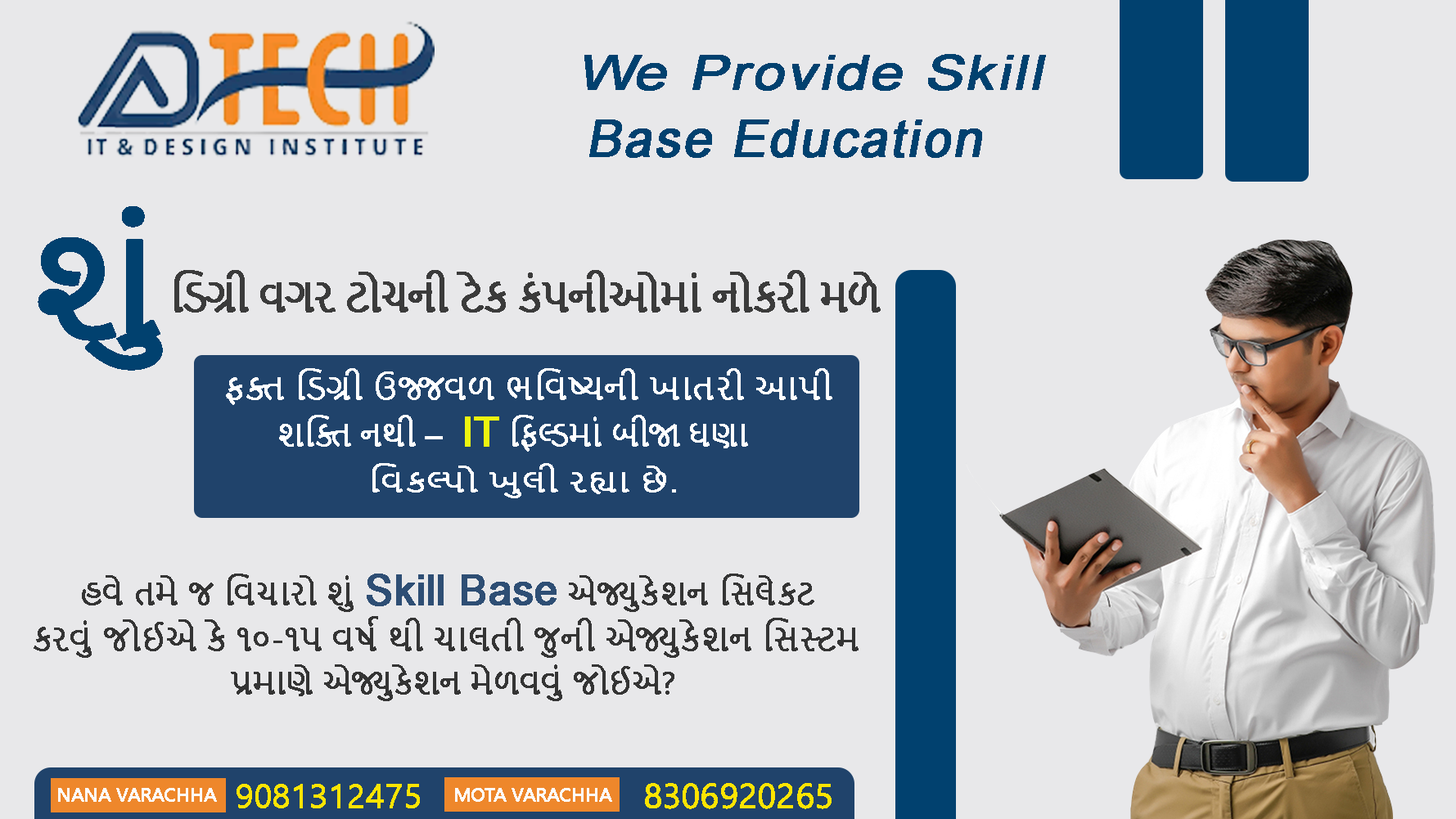
<style>
.page{position:relative;width:1456px;height:819px;background:#e8e8ea}
.page>*{position:absolute;margin:0}
.t1{font:47.7px "ArialMT";letter-spacing:0.03em;color:#01416f;font-weight:bold;font-style:italic;scale:1.19 1}
.t2{font:51.1px "ArialMT";letter-spacing:0.03em;color:#01416f;font-weight:bold;font-style:italic}
.t3{font:138.3px "NirmalaUI";letter-spacing:-0.04em;color:#01416f;font-weight:bold;scale:1.15 1}
.t4{font:40.9px "NirmalaUI";letter-spacing:-0.04em;color:#3b3b3b;font-weight:bold}
.t5{font:31.3px "NirmalaUI";color:#ffffff;font-weight:bold;scale:1.07 1}
.t6{font:30.7px "NirmalaUI";color:#ffffff;font-weight:bold}
.t7{font:30.7px "ArialMT";color:#ffffff;font-weight:bold}
.t8{font:40.9px "ArialMT";color:#edf50f;font-weight:bold}
.t9{font:27px "NirmalaUI";color:#ffffff;font-weight:bold;scale:1.3 1}
.t10{font:27px "ArialMT";color:#ffffff;font-weight:bold;scale:1.3 1}
.t11{font:31.4px "NirmalaUI";color:#343434;font-weight:bold}
.t12{font:41.9px "ArialMT";color:#2e4e74;font-weight:bold}
.t13{font:32.6px "NirmalaUI";color:#343434;font-weight:bold}
.t14{font:30.7px "NirmalaUI";color:#343434;font-weight:bold}
.t15{font:33.4px "NirmalaUI";color:#fde401;font-weight:bold}
.t16{font:34.3px "NirmalaUI";color:#fde401;font-weight:bold}
.t17{font:18.8px "NirmalaUI";color:#fcfbfb;font-weight:bold}
</style>
<div class="page">
<p class="t1" style="left:584px;top:54px;width:462px;height:37px">We Provide Skill</p>
<p class="t2" style="left:589px;top:119px;width:393px;height:39px">Base Education</p>
<p class="t3" style="left:38px;top:206px;width:125px;height:165px">શું</p>
<p class="t4" style="left:174px;top:270px;width:706px;height:43px">ડિગ્રી વગર ટોચની ટેક કંપનીઓમાં નોકરી મળે</p>
<p class="t5" style="left:226px;top:368px;width:606px;height:37px">ફક્ત ડિગ્રી ઉજ્જવળ ભવિષ્યની ખાતરી આપી</p>
<p class="t6" style="left:279px;top:415px;width:469px;height:37px">શક્તિ નથી<span class="t7"> –  </span><span class="t8">IT </span>ફિલ્ડમાં બીજા ઘણા</p>
<p class="t9" style="left:372px;top:463px;width:304px;height:35px">વિકલ્પો ખુલી રહ્યા છે<span class="t10">.</span></p>
<p class="t11" style="left:82px;top:574px;width:732px;height:38px">હવે તમે જ વિચારો શું <span class="t12">Skill Base </span>એજ્યુકેશન સિલેક્ટ</p>
<p class="t13" style="left:34px;top:616px;width:824px;height:42px">કરવું જોઈએ કે ૧૦-૧૫ વર્ષ થી ચાલતી જુની એજ્યુકેશન સિસ્ટમ</p>
<p class="t14" style="left:231px;top:664px;width:443px;height:37px">પ્રમાણે એજ્યુકેશન મેળવવું જોઈએ?</p>
<p class="t15" style="left:236px;top:784px;width:184px;height:24px">9081312475</p>
<p class="t16" style="left:645px;top:783px;width:186px;height:26px">8306920265</p>
<p class="t17" style="left:58px;top:788px;width:159px;height:14px">NANA VARACHHA</p>
<p class="t17" style="left:455px;top:788px;width:157px;height:14px">MOTA VARACHHA</p>
</div>
